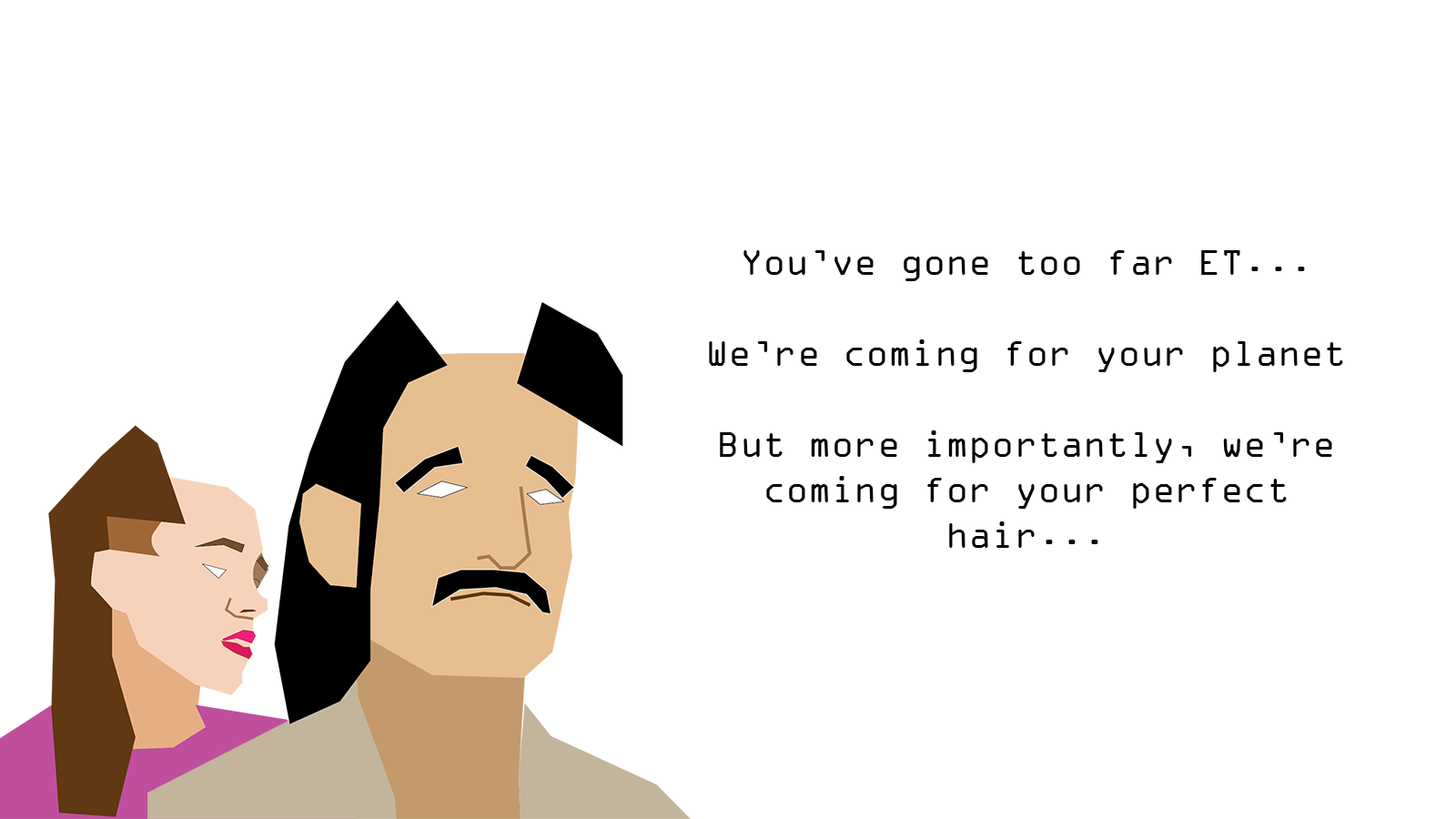
<style>
.page{position:relative;width:1456px;height:819px;background:#ffffff}
.page>*{position:absolute;margin:0}
.t1{font:37.9px "OCRAExtended";color:#000000}
</style>
<div class="page">
<p class="t1" style="left:709px;top:250px;width:634px;height:298px;text-align:center">You’ve gone too far ET...<br><br>We’re coming for your planet<br><br>But more importantly, we’re coming for your perfect hair...</p>
</div>
